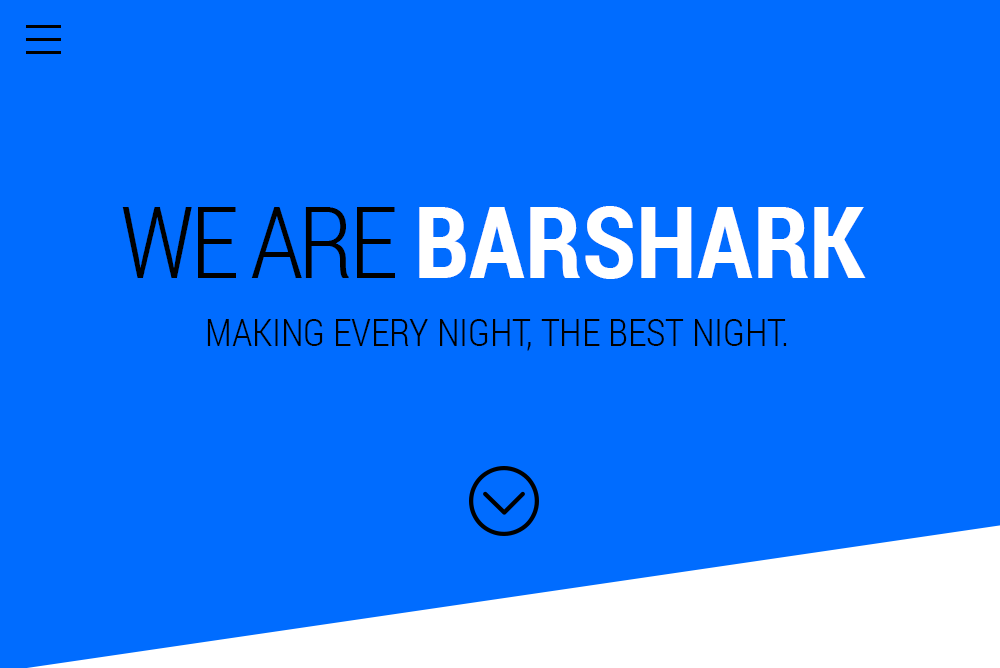
<style>
.page{position:relative;width:1000px;height:668px;background:#006cff}
.page>*{position:absolute;margin:0}
.t1{font:100px "RobotoCondensed-Bold";color:#ffffff}
.t2{font:100px "RobotoCondensed-Light";letter-spacing:-0.05em;color:#000000}
.t3{font:37.5px "RobotoCondensed-Light";color:#000000}
</style>
<div class="page">
<p class="t1" style="left:122px;top:206px;width:744px;height:73px"><span class="t2">WE ARE </span>BARSHARK</p>
<p class="t3" style="left:207px;top:319px;width:580px;height:32px">MAKING EVERY NIGHT, THE BEST NIGHT.</p>
</div>
